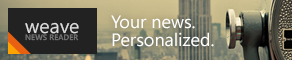
<style>
.page{position:relative;width:292px;height:60px}
.page>*{position:absolute;margin:0}
.t1{font:18px/18px "SegoeUI";color:#ffffff}
.t2{font:7.8px/7.2px "SegoeUI-Semibold";color:#767676}
.t3{font:19.6px/7.2px "SegoeUI";color:#dfdfdf}
</style>
<div class="page">
<p class="t1" style="left:111px;top:15px;width:103px;height:32px">Your news. <br>Personalized.</p>
<p class="t2" style="left:25px;top:22px;width:54px;height:19px"><span class="t3">weave<br></span>NEWS READER</p>
</div>
